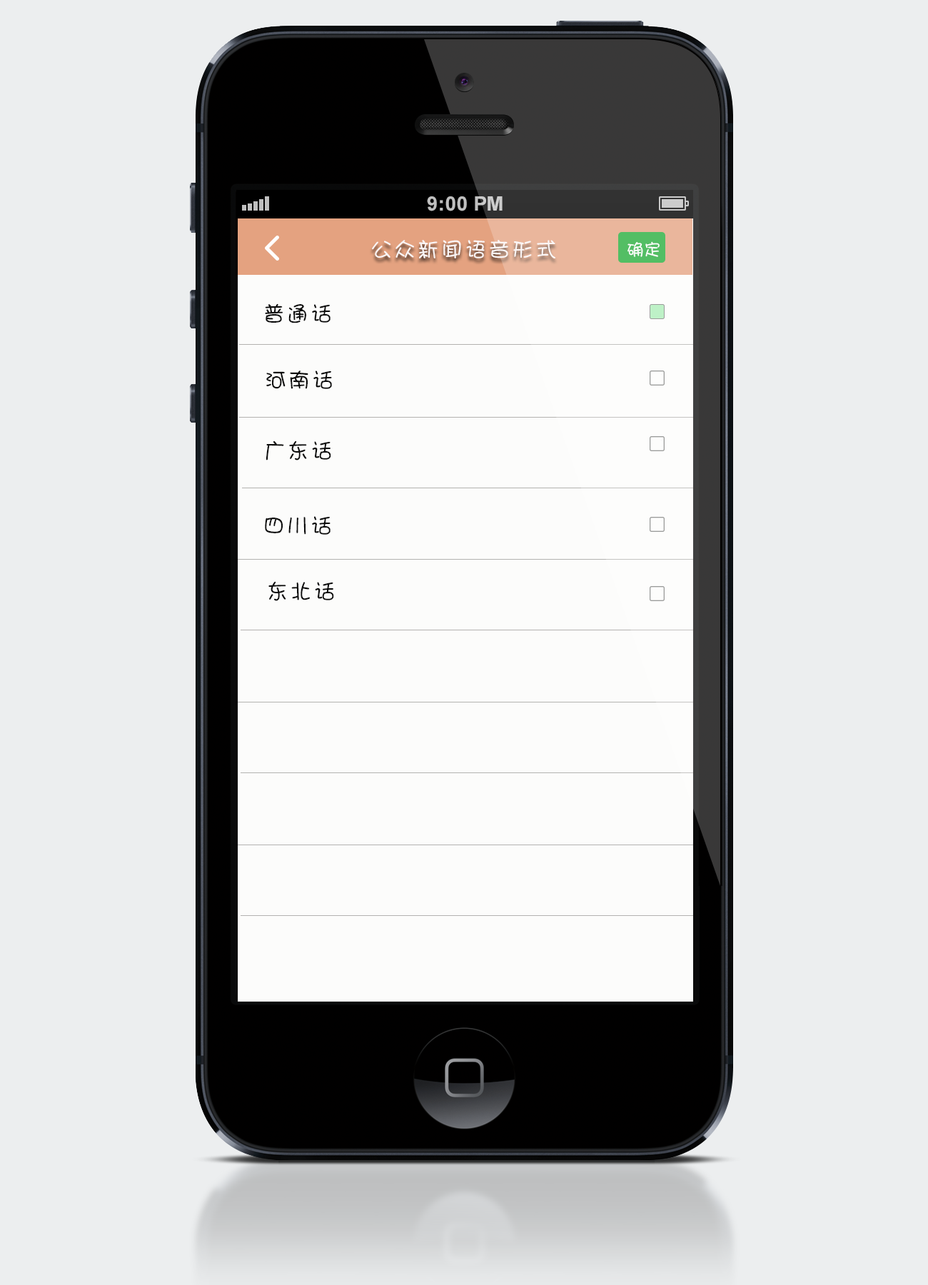
<style>
.page{position:relative;width:928px;height:1285px;background:#eceeef}
.page>*{position:absolute;margin:0}
.t1{font:21.4px "DFPShaoNvW5";letter-spacing:0.1em;color:#faf5f5}
.t2{font:17.1px "DFPShaoNvW5";letter-spacing:0.01em;color:#f9fdfa}
.t3{font:21.4px "DFPShaoNvW5";letter-spacing:0.1em;color:#0b0b0b}
</style>
<div class="page">
<p class="t1" style="left:372px;top:240px;width:183px;height:18px">公众新闻语音形式</p>
<p class="t2" style="left:627px;top:241px;width:33px;height:16px">确定</p>
<p class="t3" style="left:265px;top:303px;width:66px;height:20px">普通话</p>
<p class="t3" style="left:266px;top:370px;width:66px;height:19px">河南话</p>
<p class="t3" style="left:266px;top:440px;width:65px;height:20px">广东话</p>
<p class="t3" style="left:265px;top:516px;width:66px;height:19px">四川话</p>
<p class="t3" style="left:268px;top:581px;width:66px;height:20px">东北话</p>
</div>
